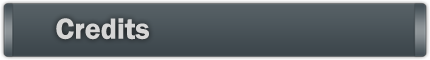
<style>
.page{position:relative;width:430px;height:60px}
.page>*{position:absolute;margin:0}
.t1{font:30px "FranklinGothic-Demi";color:#d6d6d6}
</style>
<div class="page">
<p class="t1" style="left:56px;top:18px;width:93px;height:22px">Credits</p>
</div>
